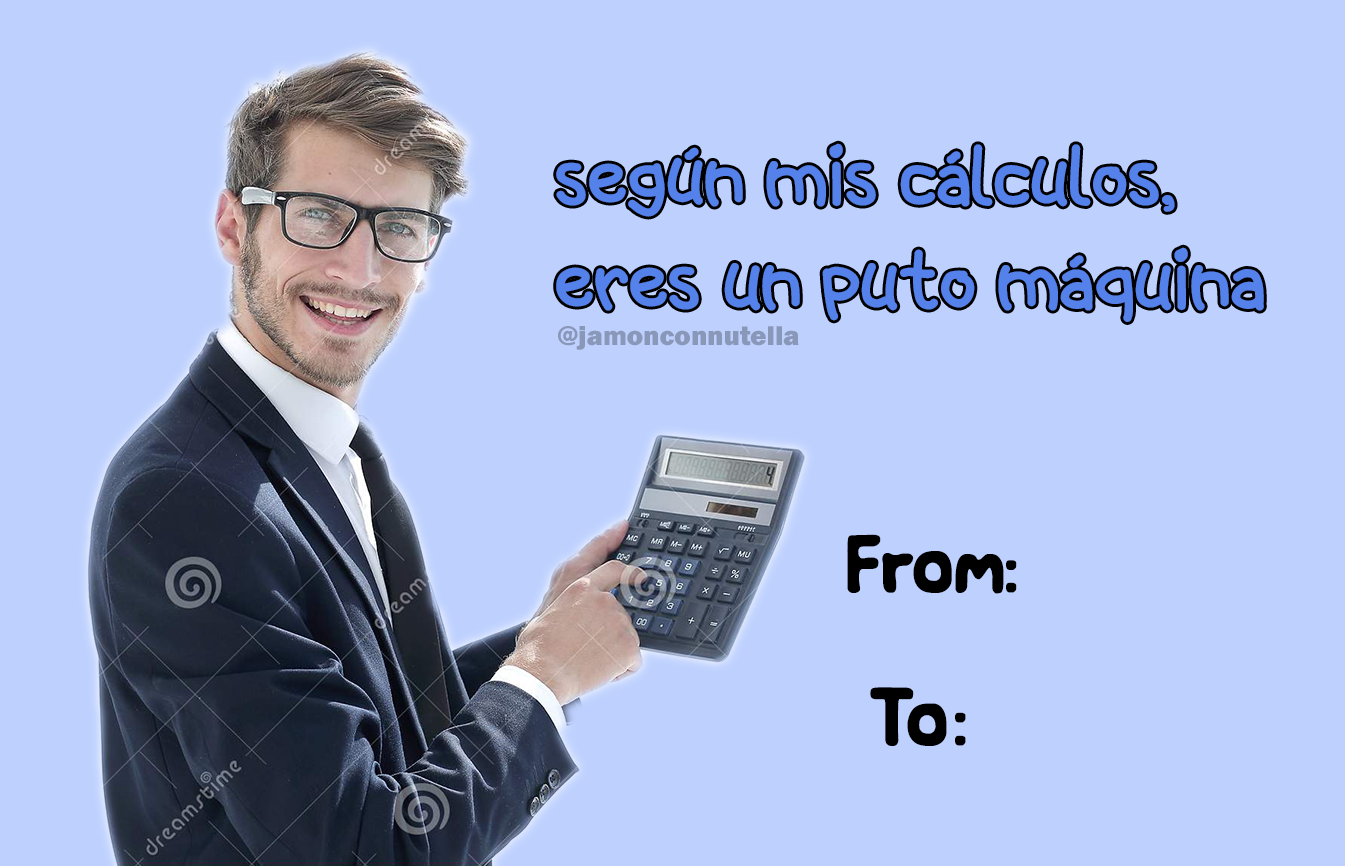
<style>
.page{position:relative;width:1345px;height:866px;background:#bed1fe}
.page>*{position:absolute;margin:0}
.t1{font:90.6px "Spacekids";color:#5581eb}
.t2{font:27.9px "FranklinGothic-Heavy";color:#8997b8}
.t3{font:104.2px "Sunglasses";color:#000000}
.t4{font:105.7px "Sunglasses";letter-spacing:0.06em;color:#000000}
</style>
<div class="page">
<p class="t1" style="left:556px;top:143px;width:708px;height:179px">según mis cálculos,<br>eres un puto máquina</p>
<p class="t2" style="left:558px;top:326px;width:241px;height:24px">@jamonconnutella</p>
<p class="t3" style="left:847px;top:534px;width:170px;height:60px">From:</p>
<p class="t4" style="left:870px;top:687px;width:96px;height:59px">To:</p>
</div>
